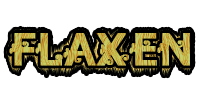
<style>
.page{position:relative;width:200px;height:100px;background:#ffffff}
.page>*{position:absolute;margin:0}
.t1{font:48px "VTKSEstilosa";color:#c6ce80;font-weight:bold}
</style>
<div class="page">
<p class="t1" style="left:9px;top:33px;width:181px;height:33px">FLAXEN</p>
</div>
